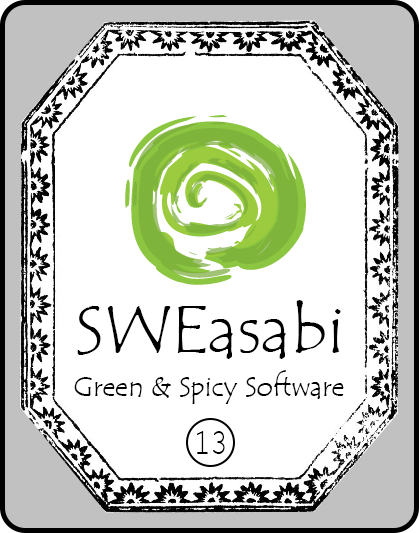
<style>
.page{position:relative;width:419px;height:533px;background:#ffffff}
.page>*{position:absolute;margin:0}
.t1{font:68px "TempusSansITC";color:#000000}
.t2{font:28px "TempusSansITC";color:#000000}
.t3{font:37px "CourierNewPSMT";color:#000000;scale:0.76 1}
</style>
<div class="page">
<p class="t1" style="left:77px;top:300px;width:264px;height:59px">SWEasabi</p>
<p class="t2" style="left:74px;top:370px;width:270px;height:34px">Green &amp; Spicy Software</p>
<p class="t3" style="left:196px;top:431px;width:29px;height:23px">13</p>
</div>
